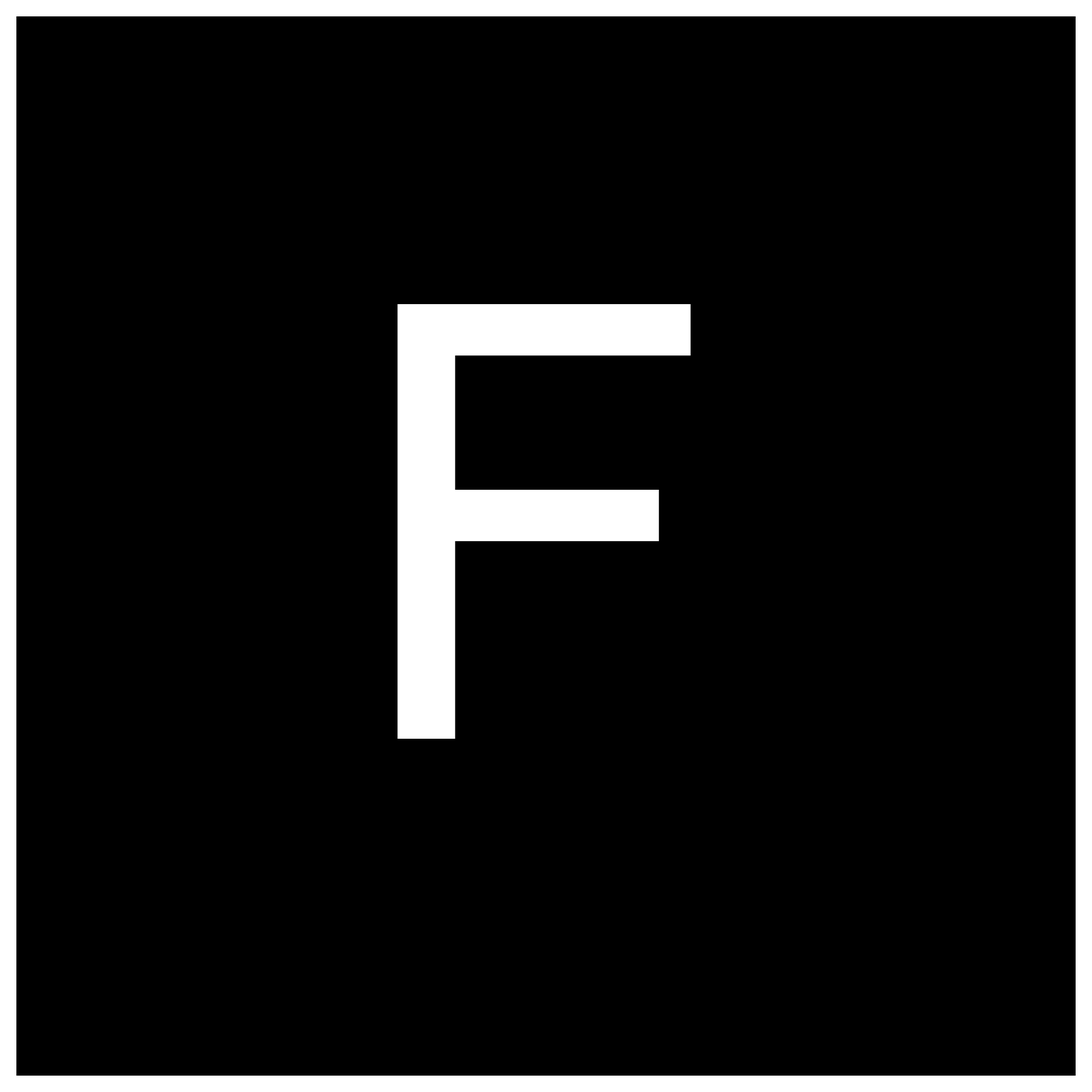
<style>
.page{position:relative;width:1092px;height:1092px;background:#000000}
.page>*{position:absolute;margin:0}
.t1{font:606.7px "ArialMT";color:#ffffff}
</style>
<div class="page">
<p class="t1" style="left:397px;top:304px;width:294px;height:435px">F</p>
</div>
